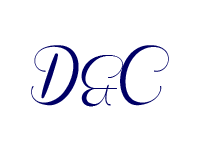
<style>
.page{position:relative;width:200px;height:152px;background:#ffffff}
.page>*{position:absolute;margin:0}
.t1{font:60px "ConeriaScriptDemo";color:#000066}
</style>
<div class="page">
<p class="t1" style="left:31px;top:45px;width:138px;height:62px">D&amp;C</p>
</div>
